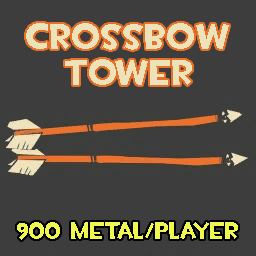
<style>
.page{position:relative;width:256px;height:256px;background:#3d3d3d}
.page>*{position:absolute;margin:0}
.t1{font:36px/36px "TF2Build";color:#ede3bb}
.t2{font:24px "TF2Build";color:#f0f850}
</style>
<div class="page">
<p class="t1" style="left:26px;top:23px;width:203px;height:62px;text-align:center">CROSSBOW<br>Tower</p>
<p class="t2" style="left:17px;top:222px;width:221px;height:18px">900 metal/player</p>
</div>
